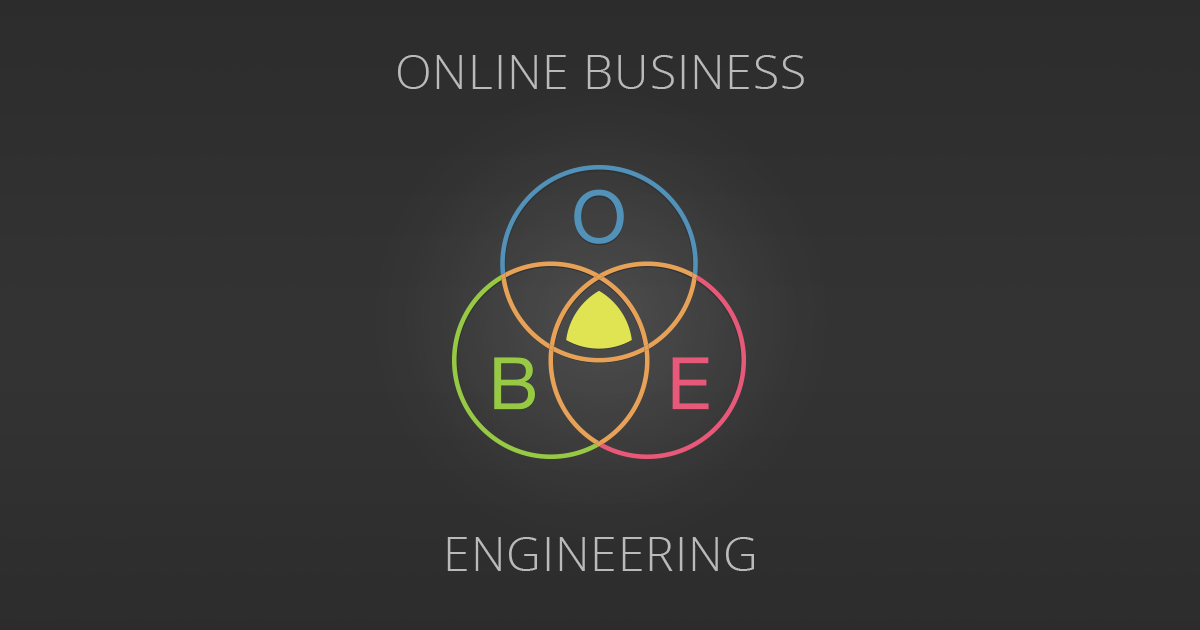
<style>
.page{position:relative;width:1200px;height:630px}
.page>*{position:absolute;margin:0}
.t1{font:47.6px "OpenSans-Light";letter-spacing:0.025em;color:#bababa}
</style>
<div class="page">
<p class="t1" style="left:398px;top:55px;width:406px;height:34px">ONLINE BUSINESS</p>
<p class="t1" style="left:447px;top:537px;width:307px;height:34px">ENGINEERING</p>
</div>
